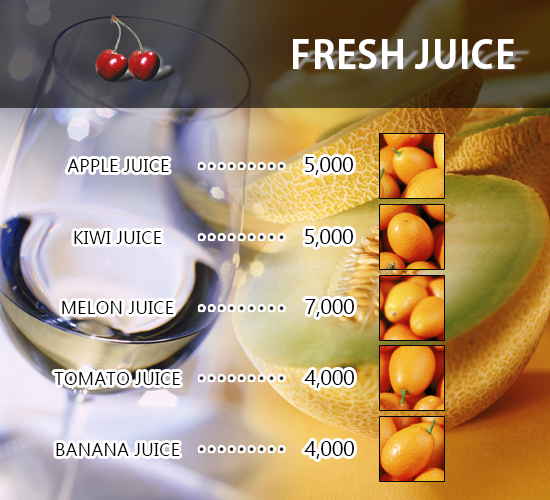
<style>
.page{position:relative;width:550px;height:500px}
.page>*{position:absolute;margin:0}
.t1{font:38px "AdobeGothicStd-Bold";letter-spacing:0.02em;color:#ffffff;text-transform:uppercase}
.t2{font:18px "Ebrima";letter-spacing:0.02em;color:#000000;text-transform:uppercase}
.t3{font:22px "Ebrima";letter-spacing:-0.02em;color:#000000;text-transform:uppercase}
</style>
<div class="page">
<p class="t1" style="left:293px;top:39px;width:222px;height:30px">fresh juice</p>
<p class="t2" style="left:67px;top:159px;width:102px;height:13px">apple juice</p>
<p class="t3" style="left:305px;top:157px;width:49px;height:18px">5,000</p>
<p class="t2" style="left:74px;top:231px;width:88px;height:13px">kiwi juice</p>
<p class="t3" style="left:305px;top:229px;width:49px;height:18px">5,000</p>
<p class="t2" style="left:62px;top:301px;width:112px;height:13px">melon juice</p>
<p class="t3" style="left:305px;top:299px;width:50px;height:18px">7,000</p>
<p class="t2" style="left:54px;top:372px;width:126px;height:13px">tomato juice</p>
<p class="t3" style="left:304px;top:370px;width:51px;height:18px">4,000</p>
<p class="t2" style="left:56px;top:443px;width:124px;height:13px">banana juice</p>
<p class="t3" style="left:304px;top:441px;width:51px;height:18px">4,000</p>
</div>
